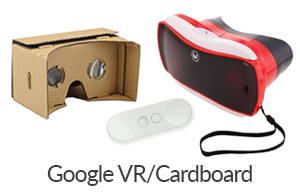
<style>
.page{position:relative;width:300px;height:194px;background:#ffffff}
.page>*{position:absolute;margin:0}
.t1{font:23px "Lato-Regular";letter-spacing:-0.04em;color:#3c3c3c}
</style>
<div class="page">
<p class="t1" style="left:47px;top:165px;width:205px;height:21px">Google VR/Cardboard</p>
</div>
